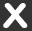
<style>
.page{position:relative;width:32px;height:31px;background:#333333}
.page>*{position:absolute;margin:0}
.t1{font:35.6px "RotondaC-Bold";letter-spacing:0.04em;color:#ffffff;text-transform:uppercase;scale:1.12 1}
</style>
<div class="page">
<p class="t1" style="left:3px;top:3px;width:25px;height:25px">х</p>
</div>
